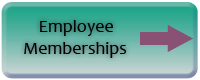
<style>
.page{position:relative;width:200px;height:80px}
.page>*{position:absolute;margin:0}
.t1{font:18px "Candara";color:#020000}
.t2{font:18px "Candara";color:#aa5555}
</style>
<div class="page">
<p class="t1" style="left:24px;top:20px;width:103px;height:38px"><span class="t2">    </span>Employee<br>Memberships</p>
</div>
